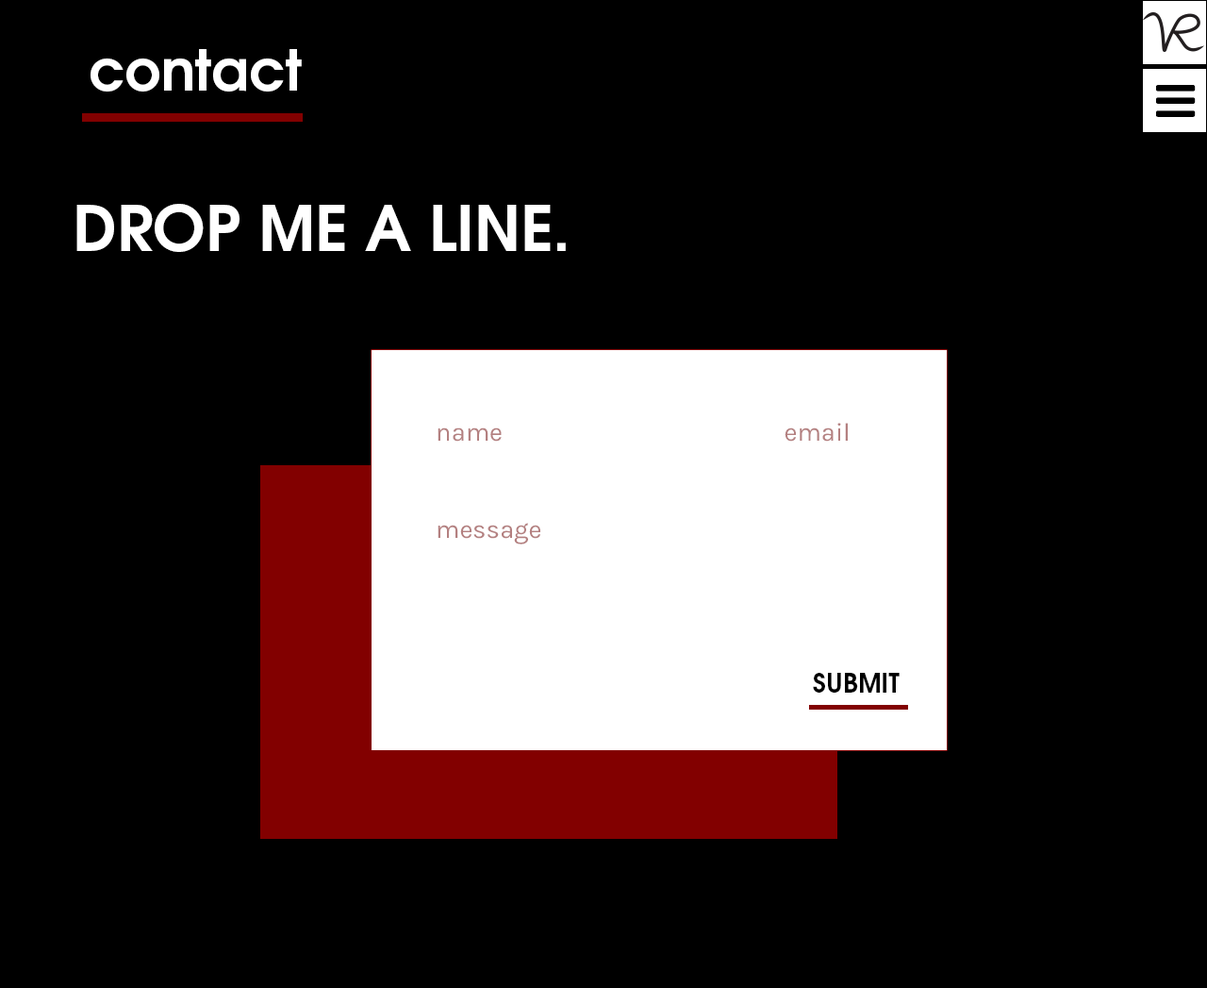
<style>
.page{position:relative;width:1207px;height:988px;background:#000000}
.page>*{position:absolute;margin:0}
.t1{font:56.6px "TeXGyreAdventor-Bold";color:#ffffff}
.t2{font:62.7px "TeXGyreAdventor-Bold";color:#ffffff}
.t3{font:25.5px "Karla-Regular";color:#b48080}
.t4{font:25.6px "Karla-Regular";color:#b48080}
.t5{font:25.9px "TeXGyreAdventor-Bold";color:#000000}
</style>
<div class="page">
<p class="t1" style="left:91px;top:49px;width:211px;height:42px">contact</p>
<p class="t2" style="left:76px;top:204px;width:490px;height:48px">DROP ME A LINE.</p>
<p class="t3" style="left:785px;top:423px;width:63px;height:18px">email</p>
<p class="t4" style="left:438px;top:427px;width:64px;height:14px">name</p>
<p class="t3" style="left:438px;top:523px;width:102px;height:21px">message</p>
<p class="t5" style="left:813px;top:673px;width:87px;height:19px">SUBMIT</p>
</div>
